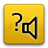
<style>
.page{position:relative;width:48px;height:48px}
.page>*{position:absolute;margin:0}
.t1{font:24px "Meiryo";color:#000000}
</style>
<div class="page">
<p class="t1" style="left:12px;top:13px;width:11px;height:18px">?</p>
</div>
